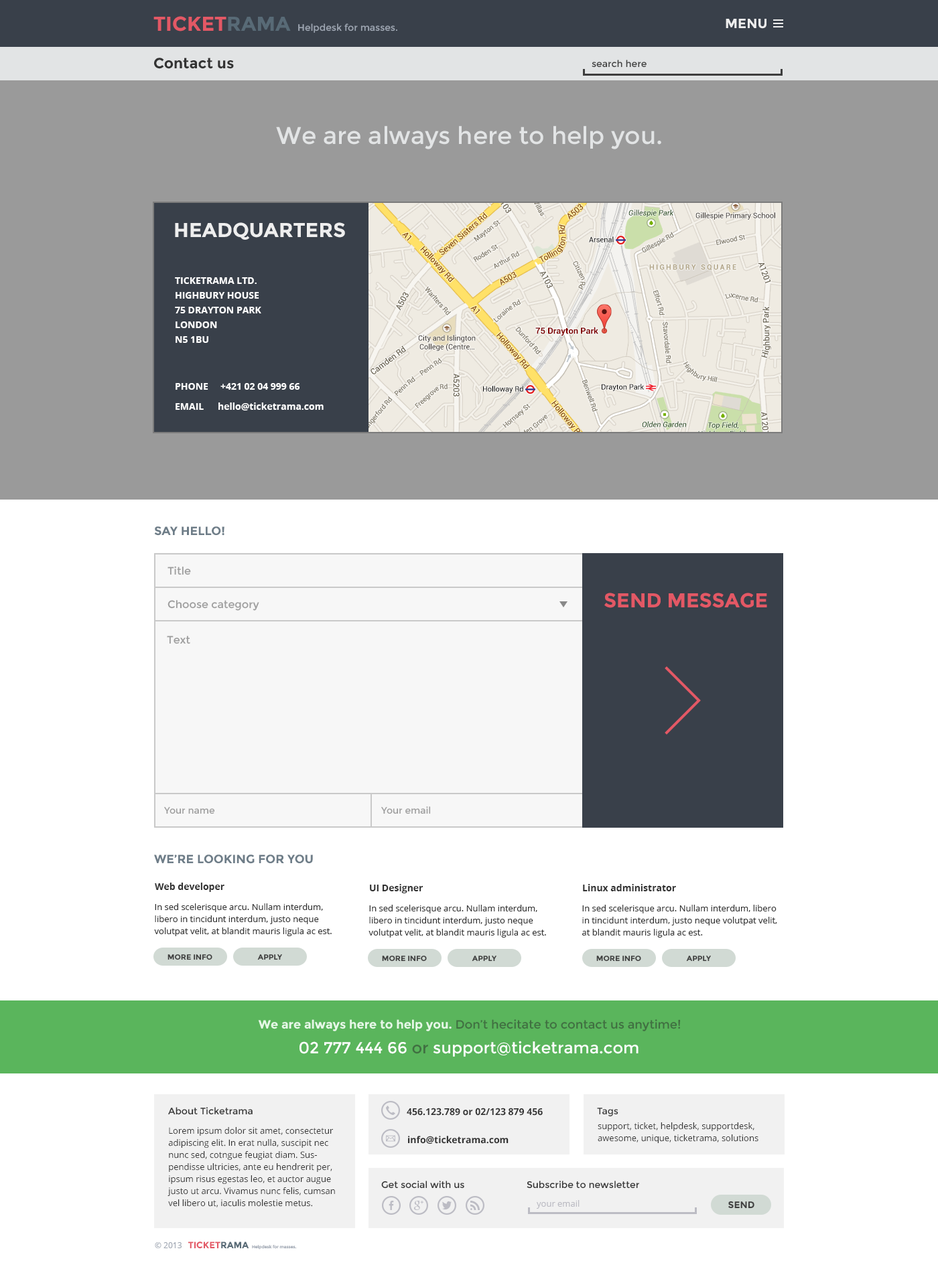
<style>
.page{position:relative;width:938px;height:1271px;background:#ffffff}
.page>*{position:absolute;margin:0}
.t1{font:20.1px "Montserrat-Bold";color:#e35865;text-transform:uppercase}
.t2{font:20.1px "Montserrat-Bold";color:#586a76;text-transform:uppercase}
.t3{font:9.4px "Montserrat-Regular";color:#9ea6b2}
.t4{font:13.4px "Montserrat-Bold";color:#eeeeee;text-transform:uppercase}
.t5{font:14.7px "Montserrat-Bold";color:#333333}
.t6{font:9.4px "Montserrat-Regular";color:#3e3e3e}
.t7{font:24.1px "Montserrat-Regular";color:#e2e4e5}
.t8{font:20.1px "Montserrat-Bold";color:#eeeeee;text-transform:uppercase}
.t9{font:9.4px/14.7px "OpenSans-Bold";color:#ffffff;text-transform:uppercase}
.t10{font:9.4px "OpenSans-Bold";color:#ffffff;text-transform:uppercase}
.t11{font:9.4px "OpenSans-Bold";color:#ffffff}
.t12{font:12.1px "Montserrat-Bold";color:#6e7d88;text-transform:uppercase}
.t13{font:10.7px "Montserrat-Regular";color:#9d9d9d}
.t14{font:9.4px "Montserrat-Regular";color:#9d9d9d}
.t15{font:9.4px "OpenSans-Bold";color:#333333}
.t16{font:8.7px/12.1px "OpenSans";color:#333333}
.t17{font:7.4px "Montserrat-Bold";color:#3e3e3e;text-transform:uppercase}
.t18{font:12.1px "Montserrat-Regular";color:#406f41}
.t19{font:12.1px "Montserrat-Bold";color:#e6f8e7}
.t20{font:16.1px "Montserrat-Regular";color:#ffffff}
.t21{font:16.1px "Montserrat-Regular";color:#406f41}
.t22{font:9.4px "Montserrat-Regular";color:#333333}
.t23{font:8.7px "OpenSans";color:#bcbcc4}
.t24{font:9.4px "Montserrat-Bold";color:#3e3e3e;text-transform:uppercase}
.t25{font:9.1px "Montserrat-Bold";color:#e35865;text-transform:uppercase}
.t26{font:9.1px "Montserrat-Bold";color:#586a76;text-transform:uppercase}
.t27{font:8px "OpenSans";color:#9ea6b2}
.t28{font:4.3px "Montserrat-Regular";color:#9ea6b2}
</style>
<div class="page">
<p class="t1" style="left:153px;top:16px;width:138px;height:15px">Ticket<span class="t2">rama</span></p>
<p class="t3" style="left:298px;top:23px;width:99px;height:10px">Helpdesk for masses.</p>
<p class="t4" style="left:725px;top:19px;width:41px;height:10px">Menu</p>
<p class="t5" style="left:154px;top:58px;width:80px;height:11px">Contact us</p>
<p class="t6" style="left:592px;top:60px;width:54px;height:8px">search here</p>
<p class="t7" style="left:276px;top:126px;width:385px;height:23px">We are always here to help you.</p>
<p class="t8" style="left:175px;top:222px;width:170px;height:18px">Headquarters</p>
<p class="t9" style="left:175px;top:277px;width:86px;height:66px">Ticketrama ltd.<br>Highbury House<br>75 Drayton Park<br>LONDON<br>N5 1BU</p>
<p class="t10" style="left:176px;top:383px;width:32px;height:7px">Phone</p>
<p class="t10" style="left:220px;top:383px;width:80px;height:7px">+421 02 04 999 66</p>
<p class="t10" style="left:176px;top:403px;width:28px;height:7px">Email</p>
<p class="t11" style="left:218px;top:403px;width:106px;height:8px">hello@ticketrama.com</p>
<p class="t12" style="left:154px;top:527px;width:70px;height:9px">Say hello!</p>
<p class="t13" style="left:167px;top:566px;width:24px;height:9px">Title</p>
<p class="t1" style="left:604px;top:593px;width:163px;height:15px">send message</p>
<p class="t13" style="left:167px;top:600px;width:92px;height:11px">Choose category</p>
<p class="t13" style="left:167px;top:636px;width:23px;height:8px">Text</p>
<p class="t14" style="left:164px;top:807px;width:51px;height:8px">Your name</p>
<p class="t14" style="left:381px;top:807px;width:50px;height:8px">Your email</p>
<p class="t12" style="left:154px;top:855px;width:159px;height:9px">we’re looking for you</p>
<p class="t15" style="left:155px;top:883px;width:69px;height:9px">Web developer</p>
<p class="t15" style="left:370px;top:884px;width:53px;height:10px">UI Designer</p>
<p class="t15" style="left:583px;top:884px;width:93px;height:8px">Linux administrator</p>
<p class="t16" style="left:154px;top:904px;width:178px;height:33px">In sed scelerisque arcu. Nullam interdum, libero in tincidunt interdum, justo neque volutpat velit, at blandit mauris ligula ac est.</p>
<p class="t16" style="left:368px;top:905px;width:178px;height:33px">In sed scelerisque arcu. Nullam interdum, libero in tincidunt interdum, justo neque volutpat velit, at blandit mauris ligula ac est.</p>
<p class="t16" style="left:582px;top:905px;width:195px;height:33px">In sed scelerisque arcu. Nullam interdum, libero in tincidunt interdum, justo neque volutpat velit, at blandit mauris ligula ac est.</p>
<p class="t17" style="left:167px;top:955px;width:45px;height:6px">more info</p>
<p class="t17" style="left:257px;top:955px;width:25px;height:6px">Apply</p>
<p class="t17" style="left:382px;top:956px;width:45px;height:6px">more info</p>
<p class="t17" style="left:472px;top:956px;width:24px;height:6px">Apply</p>
<p class="t17" style="left:596px;top:956px;width:45px;height:6px">more info</p>
<p class="t17" style="left:686px;top:956px;width:25px;height:6px">Apply</p>
<p class="t18" style="left:258px;top:1020px;width:423px;height:12px"><span class="t19">We are always here to help you. </span>Don’t hecitate to contact us anytime!</p>
<p class="t20" style="left:299px;top:1041px;width:339px;height:16px">02 777 444 66 <span class="t21">or </span>support@ticketrama.com</p>
<p class="t22" style="left:168px;top:1107px;width:85px;height:8px">About Ticketrama</p>
<p class="t15" style="left:407px;top:1108px;width:136px;height:8px">456.123.789 or 02/123 879 456</p>
<p class="t22" style="left:597px;top:1108px;width:21px;height:9px">Tags</p>
<p class="t16" style="left:167px;top:1127px;width:168px;height:81px">Lorem ipsum dolor sit amet, consectetur adipiscing elit. In erat nulla, suscipit nec nunc sed, cotngue feugiat diam. Suspendisse ultricies, ante eu hendrerit per, ipsum risus egestas leo, et auctor augue justo ut arcu. Vivamus nunc felis, cumsan vel libero ut, iaculis molestie metus.</p>
<p class="t16" style="left:598px;top:1123px;width:160px;height:21px">support, ticket, helpdesk, supportdesk,<br>awesome, unique, ticketrama, solutions</p>
<p class="t15" style="left:408px;top:1136px;width:100px;height:8px">info@ticketrama.com</p>
<p class="t22" style="left:381px;top:1181px;width:83px;height:8px">Get social with us</p>
<p class="t22" style="left:527px;top:1181px;width:112px;height:8px">Subscribe to newsletter</p>
<p class="t23" style="left:537px;top:1200px;width:42px;height:9px">your email</p>
<p class="t24" style="left:728px;top:1201px;width:26px;height:8px">Send</p>
<p class="t25" style="left:188px;top:1242px;width:61px;height:7px">Ticket<span class="t26">rama</span></p>
<p class="t27" style="left:155px;top:1243px;width:27px;height:6px">© 2013</p>
<p class="t28" style="left:252px;top:1245px;width:45px;height:5px">Helpdesk for masses.</p>
</div>
